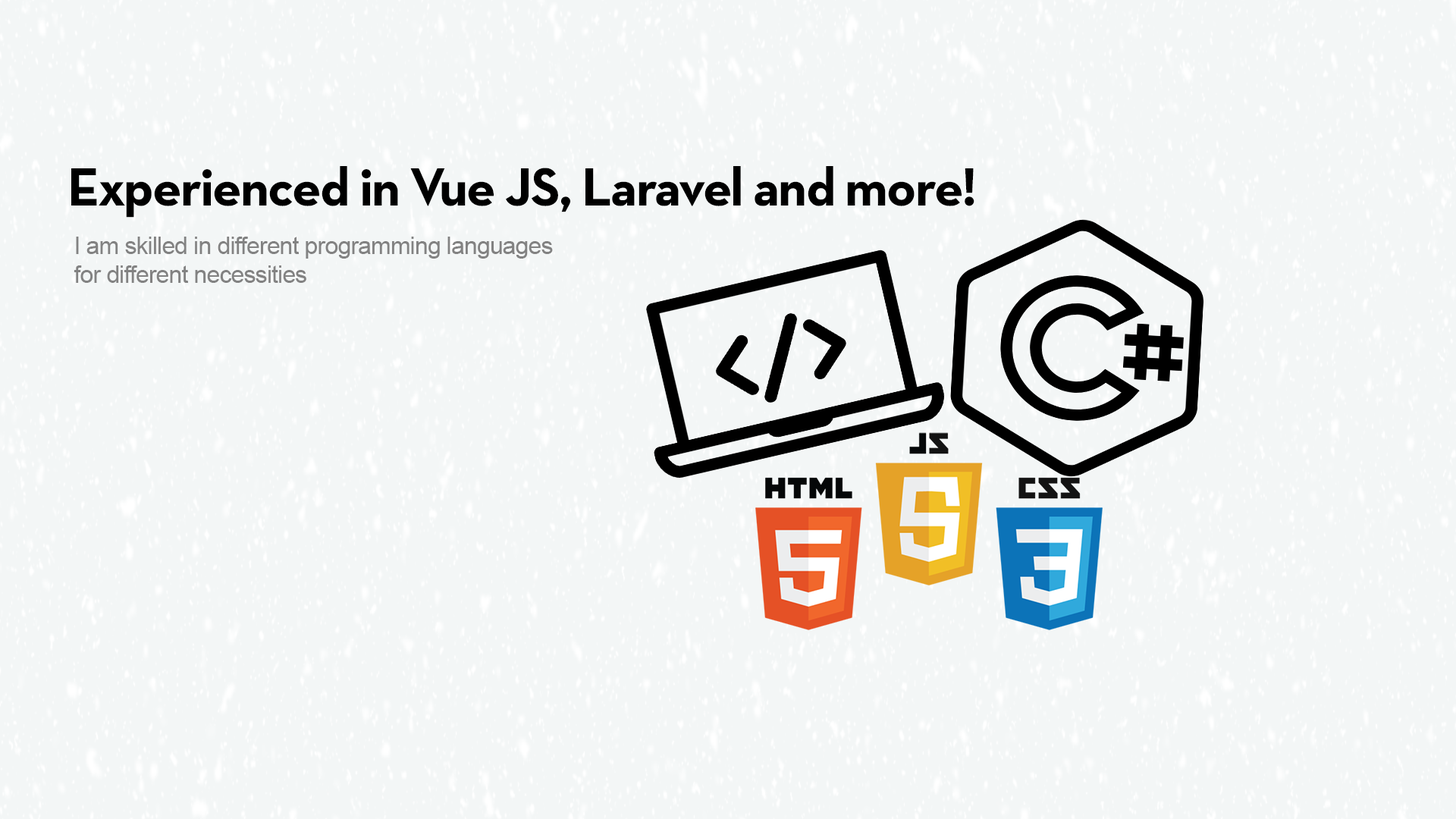
<style>
.page{position:relative;width:1456px;height:819px;background:#f3f6f6}
.page>*{position:absolute;margin:0}
.t1{font:54.6px "NeutraText-Bold";letter-spacing:-0.027em;color:#000000}
.t2{font:24.3px "ArialMT";letter-spacing:-0.027em;color:#828282}
</style>
<div class="page">
<p class="t1" style="left:71px;top:166px;width:903px;height:52px">Experienced in Vue JS, Laravel and more!</p>
<p class="t2" style="left:74px;top:237px;width:479px;height:46px">I am skilled in different programming languages<br>for different necessities</p>
</div>
